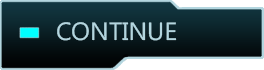
<style>
.page{position:relative;width:264px;height:70px}
.page>*{position:absolute;margin:0}
.t1{font:25px "MicrosoftPhagsPa";color:#b3d6df}
</style>
<div class="page">
<p class="t1" style="left:57px;top:22px;width:120px;height:19px">CONTINUE</p>
</div>
